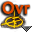
<style>
.page{position:relative;width:32px;height:32px;background:#ffffff}
.page>*{position:absolute;margin:0}
.t1{font:16px "Kartika-Bold";color:#db4800}
</style>
<div class="page">
<p class="t1" style="left:2px;top:1px;width:28px;height:13px">Ovr</p>
</div>
